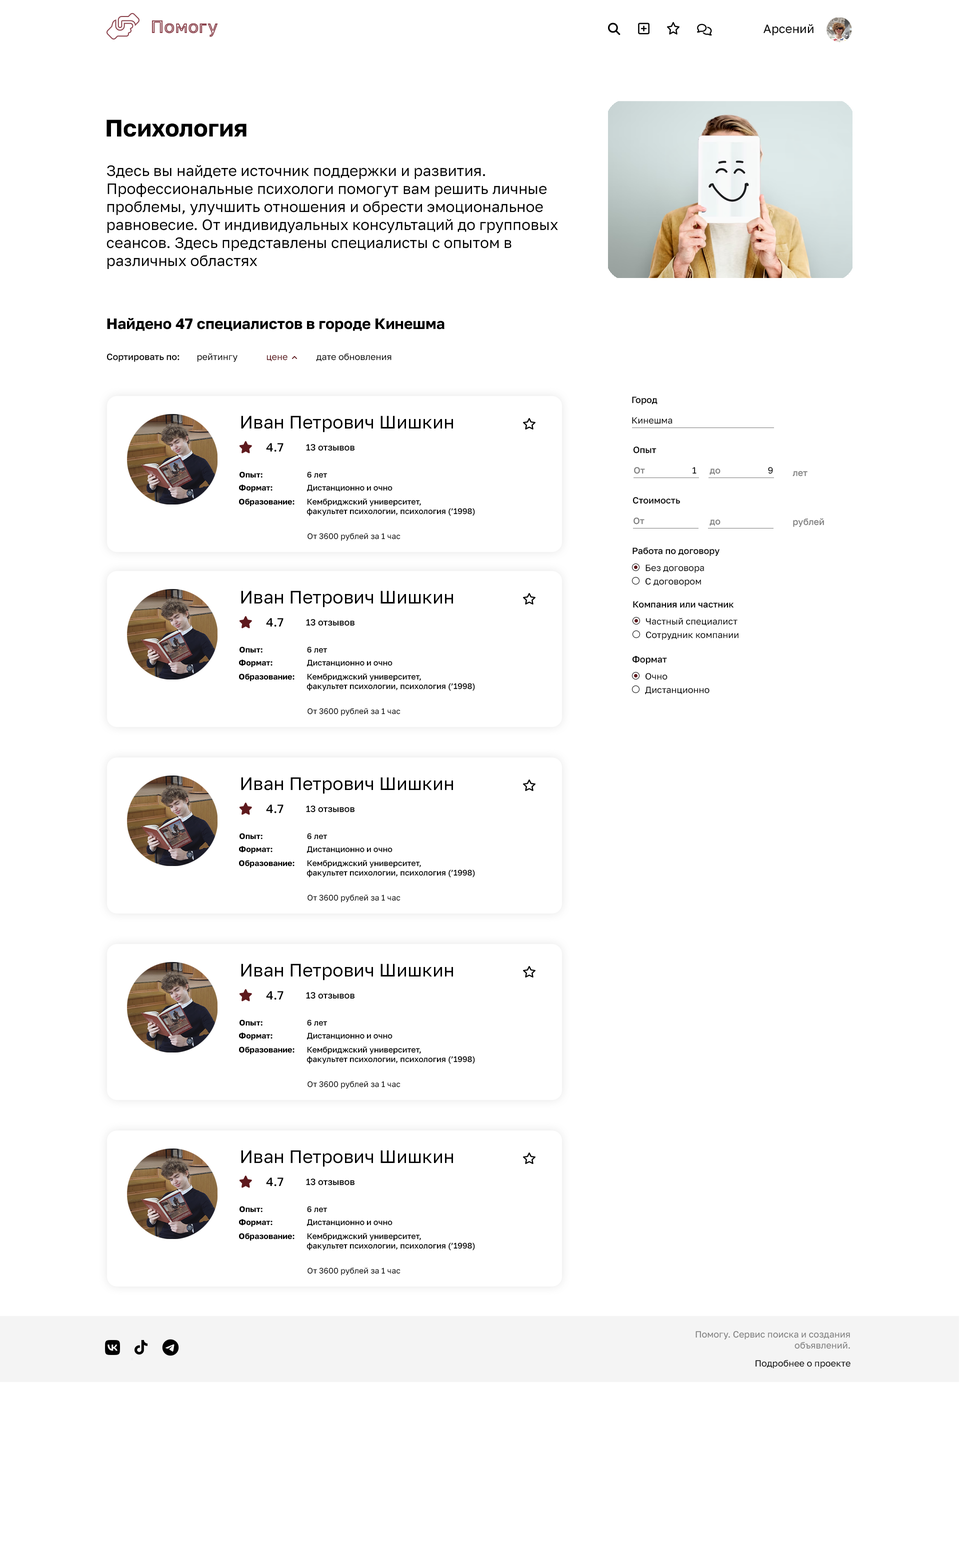
<style>
.page{position:relative;width:960px;height:1564px;background:#ffffff}
.page>*{position:absolute;margin:0}
.t1{font:18px "GolosText-SemiBold";color:#8b424c}
.t2{font:12px "GolosText-Regular";color:#000000}
.t3{font:24px "GolosText-Bold";color:#000000}
.t4{font:15px "GolosText-Regular";color:#000000}
.t5{font:15px "GolosText-Bold";color:#000000}
.t6{font:9px "GolosText-Medium";color:#000000}
.t7{font:9px "GolosText-Regular";color:#000000}
.t8{font:9px "GolosText-Regular";color:#5e191d}
.t9{font:18px "GolosText-Regular";color:#000000}
.t10{font:9px "GolosText-Regular";color:#7c7c7c}
.t11{font:12px "GolosText-Medium";color:#000000}
.t12{font:8px "GolosText-Bold";color:#000000}
.t13{font:8px "GolosText-Medium";color:#000000}
.t14{font:9px "GolosText-Medium";color:#7c7c7c}
.t15{font:8px "GolosText-Regular";color:#000000}
</style>
<div class="page">
<p class="t1" style="left:152px;top:20px;width:66px;height:17px">Помогу</p>
<p class="t2" style="left:764px;top:24px;width:50px;height:12px">Арсений</p>
<p class="t3" style="left:106px;top:120px;width:140px;height:17px">Психология</p>
<p class="t4" style="left:106px;top:165px;width:452px;height:104px">Здесь вы найдете источник поддержки и развития. Профессиональные психологи помогут вам решить личные проблемы, улучшить отношения и обрести эмоциональное равновесие. От индивидуальных консультаций до групповых сеансов. Здесь представлены специалисты с опытом в различных областях</p>
<p class="t5" style="left:107px;top:318px;width:337px;height:14px">Найдено 47 специалистов в городе Кинешма</p>
<p class="t6" style="left:106px;top:354px;width:74px;height:8px">Сортировать по:</p>
<p class="t7" style="left:197px;top:353px;width:41px;height:9px">рейтингу</p>
<p class="t7" style="left:316px;top:354px;width:76px;height:8px">дате обновления</p>
<p class="t8" style="left:266px;top:355px;width:22px;height:7px">цене</p>
<p class="t6" style="left:632px;top:396px;width:26px;height:9px">Город</p>
<p class="t9" style="left:241px;top:416px;width:212px;height:16px">Иван Петрович Шишкин</p>
<p class="t7" style="left:632px;top:417px;width:40px;height:7px"><span class="t10"> </span>Кинешма</p>
<p class="t11" style="left:266px;top:443px;width:18px;height:9px">4.7</p>
<p class="t6" style="left:306px;top:444px;width:49px;height:7px">13 отзывов</p>
<p class="t6" style="left:633px;top:446px;width:23px;height:8px">Опыт</p>
<p class="t12" style="left:240px;top:472px;width:88px;height:6px">Опыт:                      <span class="t13">6 лет</span></p>
<p class="t14" style="left:634px;top:467px;width:62px;height:7px">От                     <span class="t7">1</span></p>
<p class="t14" style="left:710px;top:467px;width:63px;height:8px">до                     <span class="t7">9</span></p>
<p class="t14" style="left:792px;top:471px;width:16px;height:5px">лет</p>
<p class="t13" style="left:239px;top:484px;width:153px;height:8px"><span class="t12">Формат:                 </span>Дистанционно и очно</p>
<p class="t6" style="left:632px;top:497px;width:48px;height:7px">Стоимость</p>
<p class="t13" style="left:239px;top:498px;width:236px;height:18px"><span class="t12">Образование:      </span>Кембриджский университет,<br>          факультет психологии, психология (’1998)</p>
<p class="t14" style="left:634px;top:518px;width:10px;height:6px">От</p>
<p class="t14" style="left:710px;top:520px;width:10px;height:6px">до</p>
<p class="t14" style="left:793px;top:518px;width:31px;height:9px">рублей</p>
<p class="t15" style="left:308px;top:533px;width:92px;height:8px">От 3600 рублей за 1 час</p>
<p class="t6" style="left:632px;top:548px;width:88px;height:8px">Работа по договору</p>
<p class="t7" style="left:646px;top:564px;width:58px;height:9px">Без договора</p>
<p class="t7" style="left:645px;top:578px;width:56px;height:8px">С договором</p>
<p class="t9" style="left:241px;top:590px;width:212px;height:18px">Иван Петрович Шишкин</p>
<p class="t6" style="left:633px;top:601px;width:101px;height:7px">Компания или частник</p>
<p class="t7" style="left:646px;top:618px;width:92px;height:8px">Частный специалист</p>
<p class="t11" style="left:266px;top:618px;width:18px;height:9px">4.7</p>
<p class="t6" style="left:306px;top:619px;width:49px;height:7px">13 отзывов</p>
<p class="t7" style="left:646px;top:632px;width:92px;height:8px">Сотрудник компании</p>
<p class="t12" style="left:240px;top:646px;width:88px;height:7px">Опыт:                      <span class="t13">6 лет</span></p>
<p class="t13" style="left:239px;top:660px;width:153px;height:8px"><span class="t12">Формат:                 </span>Дистанционно и очно</p>
<p class="t6" style="left:632px;top:656px;width:35px;height:8px">Формат</p>
<p class="t13" style="left:239px;top:674px;width:236px;height:17px"><span class="t12">Образование:      </span>Кембриджский университет,<br>          факультет психологии, психология (’1998)</p>
<p class="t7" style="left:645px;top:673px;width:23px;height:7px">Очно</p>
<p class="t7" style="left:645px;top:686px;width:65px;height:8px">Дистанционно</p>
<p class="t15" style="left:308px;top:708px;width:92px;height:8px">От 3600 рублей за 1 час</p>
<p class="t9" style="left:241px;top:777px;width:212px;height:17px">Иван Петрович Шишкин</p>
<p class="t11" style="left:266px;top:804px;width:18px;height:10px">4.7</p>
<p class="t6" style="left:306px;top:806px;width:49px;height:6px">13 отзывов</p>
<p class="t12" style="left:240px;top:833px;width:88px;height:7px">Опыт:                      <span class="t13">6 лет</span></p>
<p class="t13" style="left:239px;top:846px;width:153px;height:8px"><span class="t12">Формат:                 </span>Дистанционно и очно</p>
<p class="t13" style="left:239px;top:860px;width:236px;height:18px"><span class="t12">Образование:      </span>Кембриджский университет,<br>          факультет психологии, психология (’1998)</p>
<p class="t15" style="left:308px;top:894px;width:92px;height:8px">От 3600 рублей за 1 час</p>
<p class="t9" style="left:241px;top:964px;width:212px;height:16px">Иван Петрович Шишкин</p>
<p class="t11" style="left:266px;top:991px;width:18px;height:9px">4.7</p>
<p class="t6" style="left:306px;top:992px;width:49px;height:7px">13 отзывов</p>
<p class="t12" style="left:240px;top:1020px;width:88px;height:6px">Опыт:                      <span class="t13">6 лет</span></p>
<p class="t13" style="left:239px;top:1032px;width:153px;height:8px"><span class="t12">Формат:                 </span>Дистанционно и очно</p>
<p class="t13" style="left:239px;top:1046px;width:236px;height:18px"><span class="t12">Образование:      </span>Кембриджский университет,<br>          факультет психологии, психология (’1998)</p>
<p class="t15" style="left:308px;top:1081px;width:92px;height:8px">От 3600 рублей за 1 час</p>
<p class="t9" style="left:241px;top:1150px;width:212px;height:17px">Иван Петрович Шишкин</p>
<p class="t11" style="left:266px;top:1178px;width:18px;height:8px">4.7</p>
<p class="t6" style="left:306px;top:1178px;width:49px;height:8px">13 отзывов</p>
<p class="t12" style="left:240px;top:1206px;width:88px;height:6px">Опыт:                      <span class="t13">6 лет</span></p>
<p class="t13" style="left:239px;top:1219px;width:153px;height:8px"><span class="t12">Формат:                 </span>Дистанционно и очно</p>
<p class="t13" style="left:239px;top:1233px;width:236px;height:17px"><span class="t12">Образование:      </span>Кембриджский университет,<br>          факультет психологии, психология (’1998)</p>
<p class="t15" style="left:308px;top:1268px;width:92px;height:8px">От 3600 рублей за 1 час</p>
<p class="t10" style="left:696px;top:1331px;width:154px;height:18px;text-align:right">Помогу. Сервис поиска и создания<br>объявлений.</p>
<p class="t7" style="left:756px;top:1360px;width:94px;height:8px">Подробнее о проекте</p>
</div>
